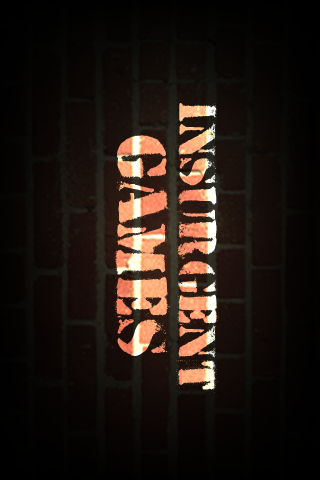
<style>
.page{position:relative;width:320px;height:480px}
.page>*{position:absolute;margin:0}
.t1{font:50px/62px "HVDPeace"}
.t2{font:67px/62px "HVDPeace"}
</style>
<div class="page">
<p class="t1" style="left:112px;top:103px;width:107px;height:290px;text-align:center;rotate:90deg">Insurgent<br><span class="t2">Games</span></p>
</div>
